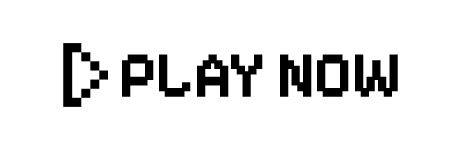
<style>
.page{position:relative;width:450px;height:150px;background:#ffffff}
.page>*{position:absolute;margin:0}
.t1{font:64.9px "PixelifySans-Bold";letter-spacing:-0.025em;color:#000000}
</style>
<div class="page">
<p class="t1" style="left:122px;top:54px;width:276px;height:43px">PLAY NOW</p>
</div>
